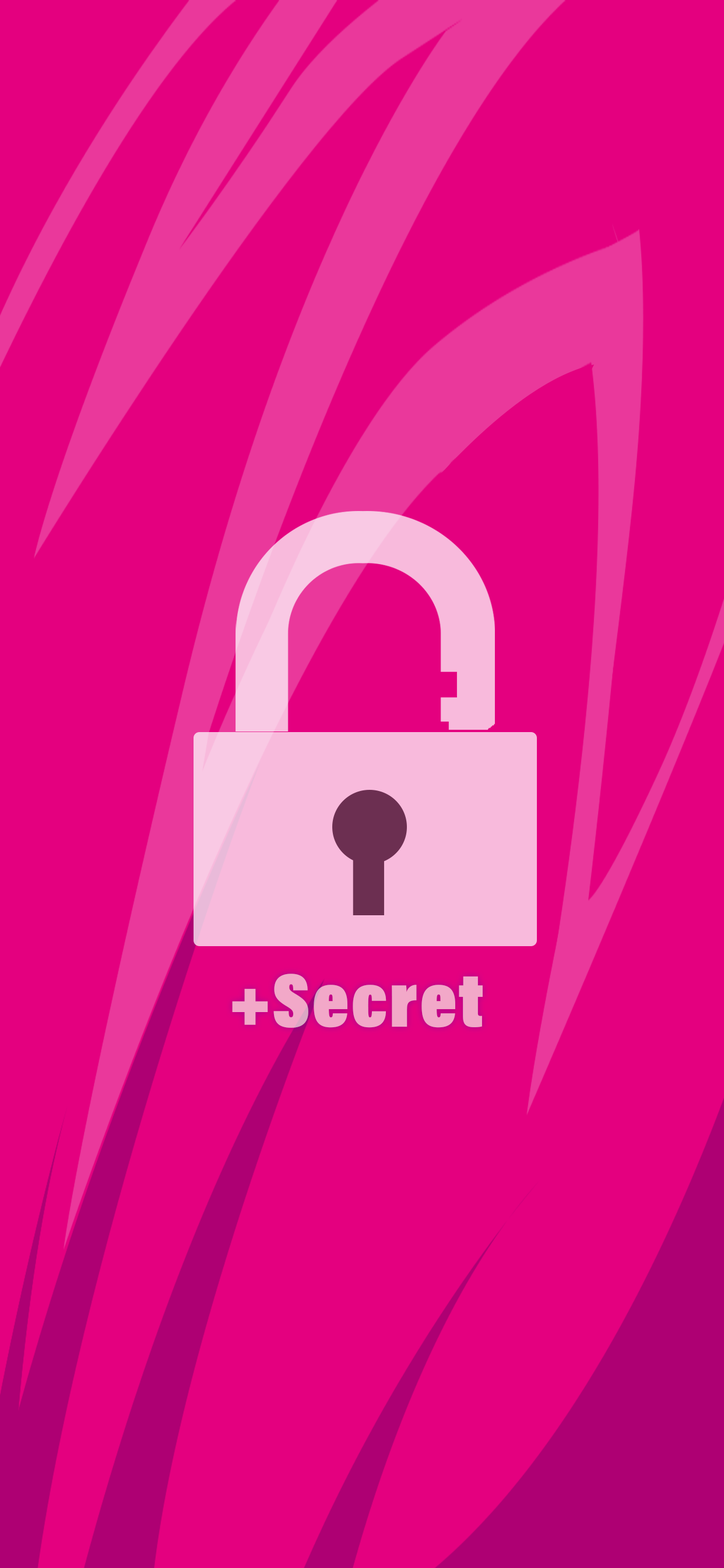
<style>
.page{position:relative;width:724px;height:1568px;background:#e4007f}
.page>*{position:absolute;margin:0}
.t1{font:76.7px "AcuminConcept-CondensedUltraBlack";letter-spacing:0.025em;color:#f2a8c8}
</style>
<div class="page">
<p class="t1" style="left:232px;top:974px;width:251px;height:54px">+Secret</p>
</div>
